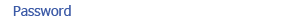
<style>
.page{position:relative;width:300px;height:24px;background:#ffffff}
.page>*{position:absolute;margin:0}
.t1{font:14px "Tahoma";color:#3d5ba7}
</style>
<div class="page">
<p class="t1" style="left:13px;top:5px;width:58px;height:11px">Password</p>
</div>
